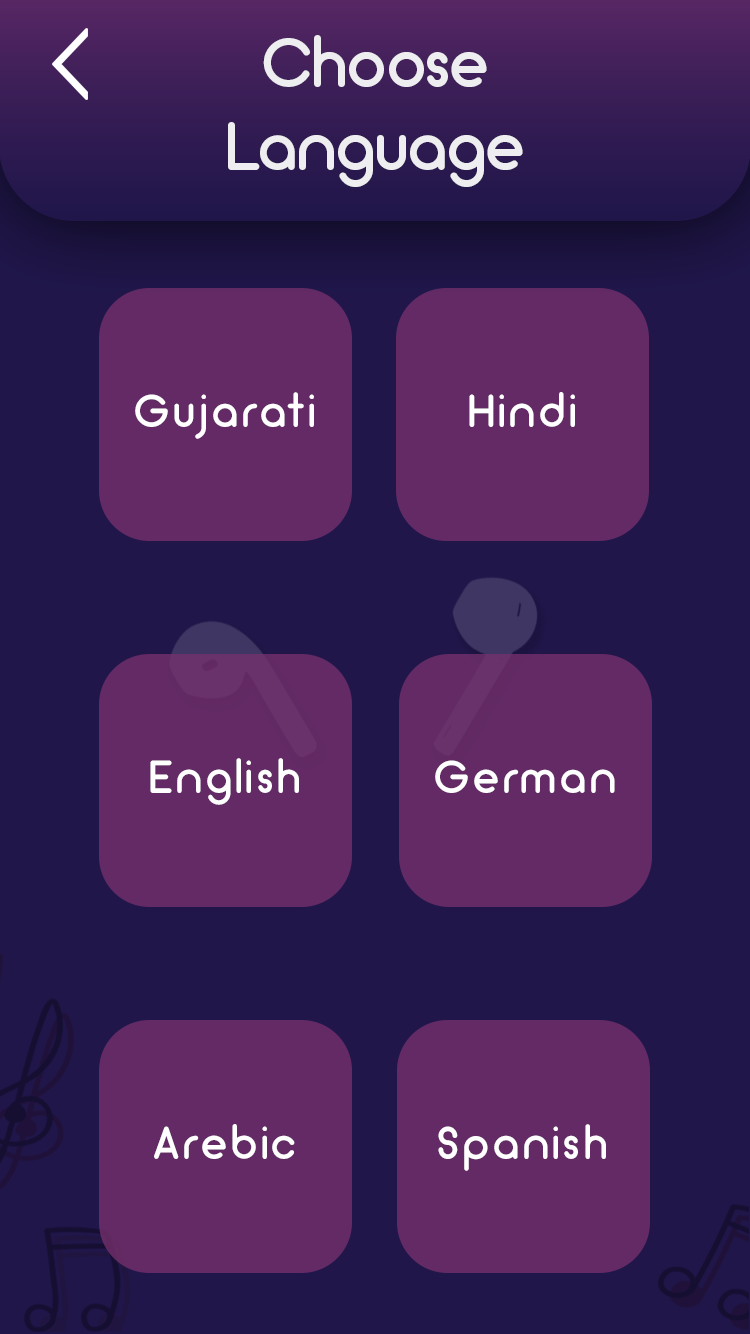
<style>
.page{position:relative;width:750px;height:1334px;background:#20164a}
.page>*{position:absolute;margin:0}
.t1{font:69.5px "Arciform";color:#eeeef0}
.t2{font:46.5px "Arciform";letter-spacing:0.075em;color:#ffffff}
</style>
<div class="page">
<p class="t1" style="left:228px;top:35px;width:295px;height:152px;text-align:center">Choose<br>Language</p>
<p class="t2" style="left:135px;top:392px;width:179px;height:47px">Gujarati</p>
<p class="t2" style="left:469px;top:392px;width:106px;height:35px">Hindi</p>
<p class="t2" style="left:150px;top:758px;width:149px;height:47px">English</p>
<p class="t2" style="left:435px;top:760px;width:180px;height:33px">German</p>
<p class="t2" style="left:154px;top:1124px;width:141px;height:35px">Arebic</p>
<p class="t2" style="left:438px;top:1124px;width:168px;height:47px">Spanish</p>
</div>
